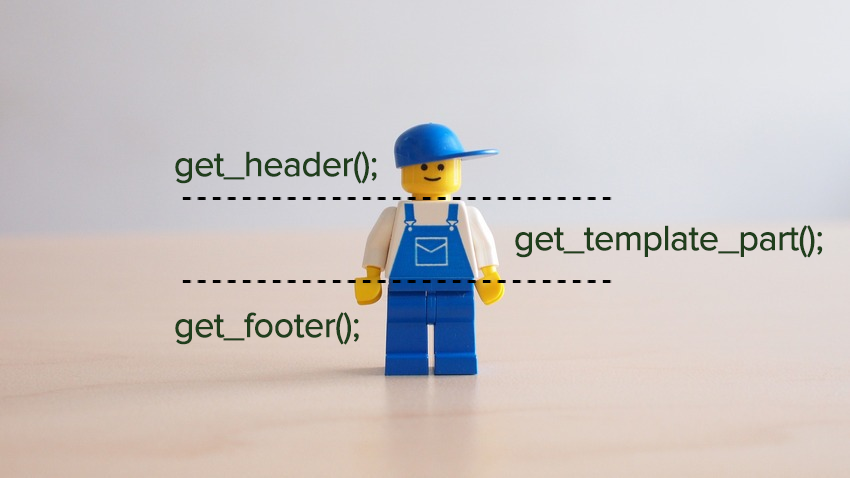
<style>
.page{position:relative;width:850px;height:478px}
.page>*{position:absolute;margin:0}
.t1{font:36px "ProximaNova-Regular";letter-spacing:-0.04em;color:#203e1c;font-weight:bold}
</style>
<div class="page">
<p class="t1" style="left:175px;top:151px;width:202px;height:33px">get_header();</p>
<p class="t1" style="left:515px;top:225px;width:308px;height:33px">get_template_part();</p>
<p class="t1" style="left:175px;top:312px;width:184px;height:33px">get_footer();</p>
</div>
